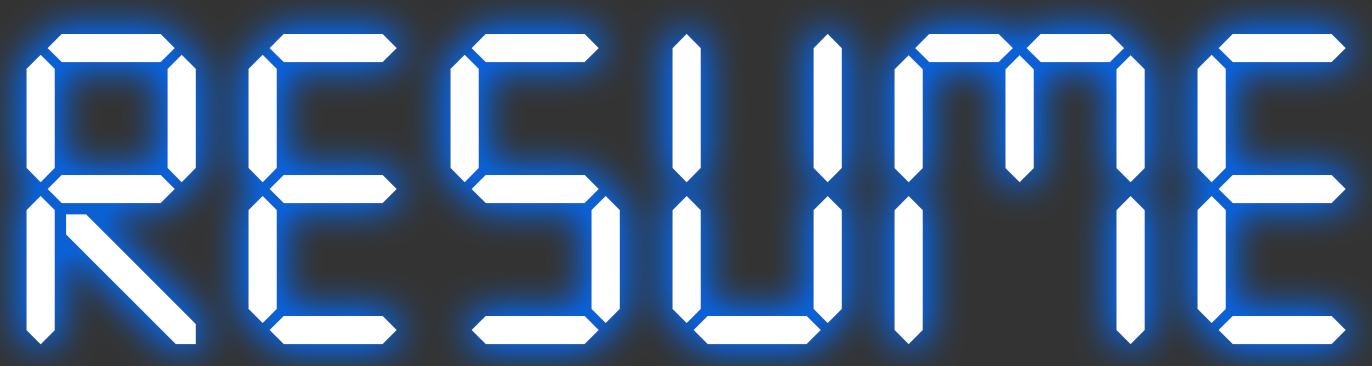
<style>
.page{position:relative;width:1372px;height:366px;background:#ffffff}
.page>*{position:absolute;margin:0}
.t1{font:442.6px "SevenSegmentRegular";color:#ffffff}
</style>
<div class="page">
<p class="t1" style="left:26px;top:34px;width:1320px;height:311px">resume</p>
</div>
